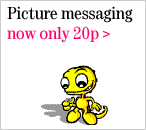
<style>
.page{position:relative;width:146px;height:130px;background:#ffffff}
.page>*{position:absolute;margin:0}
.t1{font:18px/20px "Tele-Antiqua";color:#000000}
.t2{font:18px/20px "Tele-Antiqua";color:#ff0066}
.t3{font:14px/20px "ArialMT";color:#ff0066}
</style>
<div class="page">
<p class="t1" style="left:7px;top:6px;width:126px;height:37px">Picture messaging <br><span class="t2">now only 20p </span><span class="t3">&gt;</span></p>
</div>
